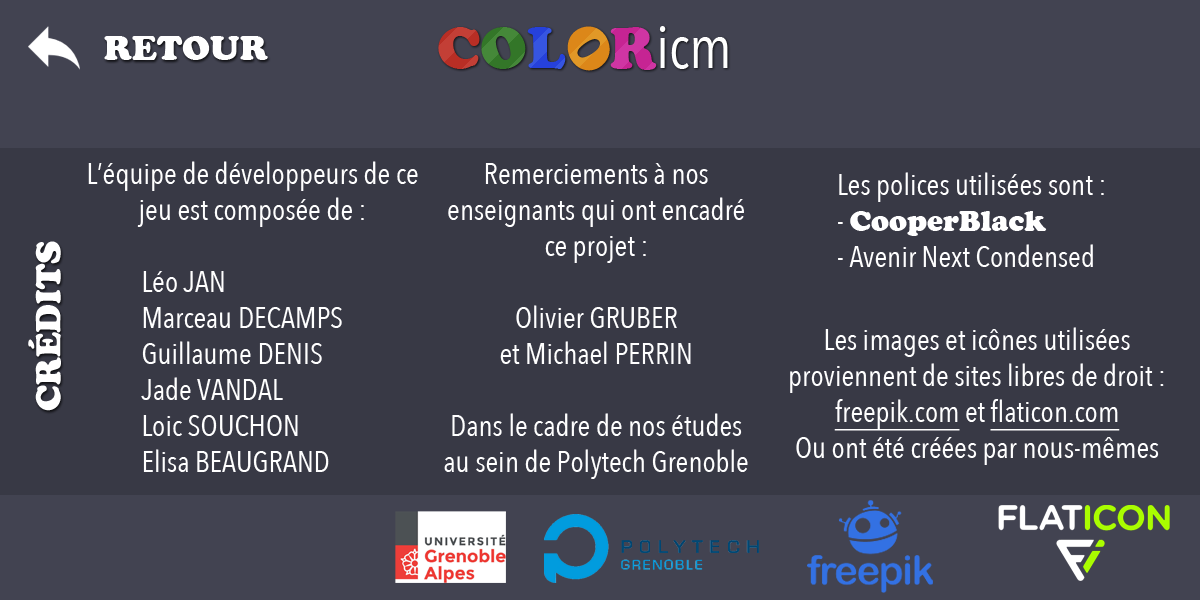
<style>
.page{position:relative;width:1200px;height:600px;background:#383945}
.page>*{position:absolute;margin:0}
.t1{font:30px "AvenirNextCondensed-Regular";color:#ffffff}
.t2{font:30px "CooperBlack";color:#ffffff}
.t3{font:30px "AvenirNextCondensed-Regular";color:#ffffff;text-decoration:underline}
</style>
<div class="page">
<p class="t1" style="left:88px;top:161px;width:330px;height:311px;text-align:center">L’équipe de développeurs de ce jeu est composée de :<br><br>Léo JAN<br>Marceau DECAMPS<br>Guillaume DENIS<br>Jade VANDAL<br>Loic SOUCHON<br>Elisa BEAUGRAND</p>
<p class="t1" style="left:444px;top:163px;width:304px;height:316px;text-align:center">Remerciements à nos enseignants qui ont encadré ce projet :<br><br>Olivier GRUBER <br>et Michael PERRIN<br><br>Dans le cadre de nos études au sein de Polytech Grenoble</p>
<p class="t1" style="left:838px;top:172px;width:266px;height:95px">Les polices utilisées sont :<br>- <span class="t2">CooperBlack<br></span>- Avenir Next Condensed</p>
<p class="t1" style="left:790px;top:327px;width:374px;height:138px;text-align:center">Les images et icônes utilisées proviennent de sites libres de droit : <span class="t3">freepik.com</span> et <span class="t3">flaticon.com<br></span>Ou ont été créées par nous-mêmes</p>
</div>
